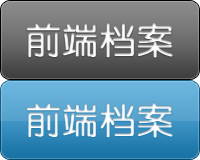
<style>
.page{position:relative;width:200px;height:160px}
.page>*{position:absolute;margin:0}
.t1{font:36px "FZY3JW--GB1-0";letter-spacing:0.01em;color:#ededed;font-weight:bold}
.t2{font:36px "FZY3JW--GB1-0";letter-spacing:0.01em;font-weight:bold}
</style>
<div class="page">
<p class="t1" style="left:26px;top:22px;width:147px;height:36px">前端档案</p>
<p class="t2" style="left:26px;top:102px;width:147px;height:36px">前端档案</p>
</div>
